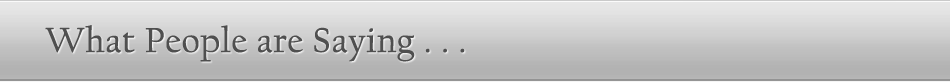
<style>
.page{position:relative;width:950px;height:82px}
.page>*{position:absolute;margin:0}
.t1{font:36px "CalifornianFB-Reg";color:#4f4f4f;font-weight:bold}
</style>
<div class="page">
<p class="t1" style="left:45px;top:25px;width:420px;height:37px">What People are Saying . . .</p>
</div>
